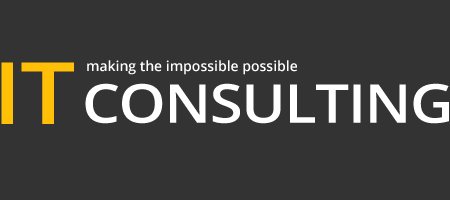
<style>
.page{position:relative;width:450px;height:200px;background:#333333}
.page>*{position:absolute;margin:0}
.t1{font:14px "OpenSans-Semibold";color:#ffffff}
.t2{font:53.9px "OpenSans-Semibold";letter-spacing:-0.025em;color:#ffffff;text-transform:uppercase;scale:1.11 1}
</style>
<div class="page">
<p class="t1" style="left:87px;top:60px;width:210px;height:15px">making the impossible possible</p>
<p class="t2" style="left:85px;top:83px;width:364px;height:41px">Consulting</p>
</div>
